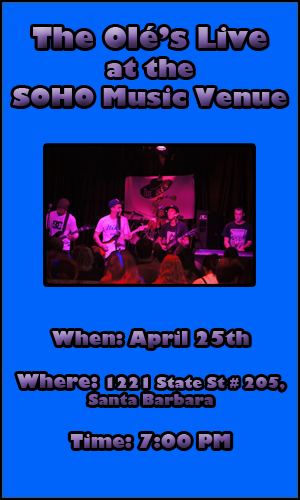
<style>
.page{position:relative;width:300px;height:500px;background:#0064fa}
.page>*{position:absolute;margin:0}
.t1{font:24px "GillSans-UltraBold"}
.t2{font:28px "GillSans-UltraBold"}
.t3{font:14px "GillSans-UltraBold"}
.t4{font:18px "GillSans-UltraBold"}
</style>
<div class="page">
<p class="t1" style="left:12px;top:26px;width:275px;height:80px;text-align:center"><span class="t2">The Olé’s Live<br></span>at the<br>SOHO Music Venue</p>
<p class="t3" style="left:17px;top:331px;width:268px;height:117px;text-align:center"><span class="t4">When: April 25th<br><br>Where: </span>1221 State St # 205,<br>Santa Barbara<br><span class="t4"><br>Time: 7:00 PM</span></p>
</div>
